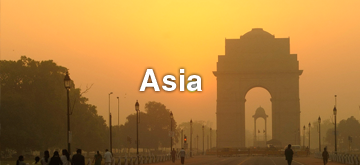
<style>
.page{position:relative;width:360px;height:165px}
.page>*{position:absolute;margin:0}
.t1{font:30px "HelveticaLTStd-Bold";letter-spacing:0.009em;color:#ffffff}
</style>
<div class="page">
<p class="t1" style="left:139px;top:69px;width:63px;height:22px">Asia</p>
</div>
